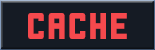
<style>
.page{position:relative;width:155px;height:50px;background:#151b24}
.page>*{position:absolute;margin:0}
.t1{font:36px "Cornerstone";color:#f5494d}
</style>
<div class="page">
<p class="t1" style="left:28px;top:13px;width:99px;height:26px">cache</p>
</div>
